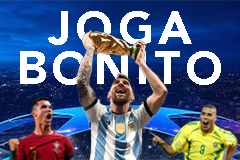
<style>
.page{position:relative;width:240px;height:160px}
.page>*{position:absolute;margin:0}
.t1{font:45.8px "Avenir-Black";letter-spacing:0.1em;color:#ffffff}
</style>
<div class="page">
<p class="t1" style="left:20px;top:11px;width:201px;height:74px">JOGA BONITO</p>
</div>
